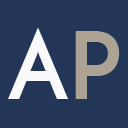
<style>
.page{position:relative;width:128px;height:128px;background:#233657}
.page>*{position:absolute;margin:0}
.t1{font:91.7px "JosefinSans-Bold";color:#fafafa}
.t2{font:91.7px "JosefinSans-Bold";color:#aca394}
</style>
<div class="page">
<p class="t1" style="left:8px;top:27px;width:112px;height:72px">A<span class="t2">P</span></p>
</div>
